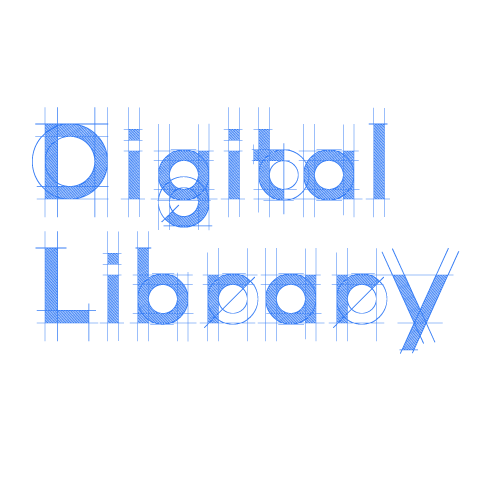
<style>
.page{position:relative;width:480px;height:480px;background:#ffffff}
.page>*{position:absolute;margin:0}
.t1{font:120px "R&C-Demo";color:#387ef5}
</style>
<div class="page">
<p class="t1" style="left:32px;top:107px;width:358px;height:124px">Digital</p>
<p class="t1" style="left:35px;top:231px;width:425px;height:123px">Library</p>
</div>
